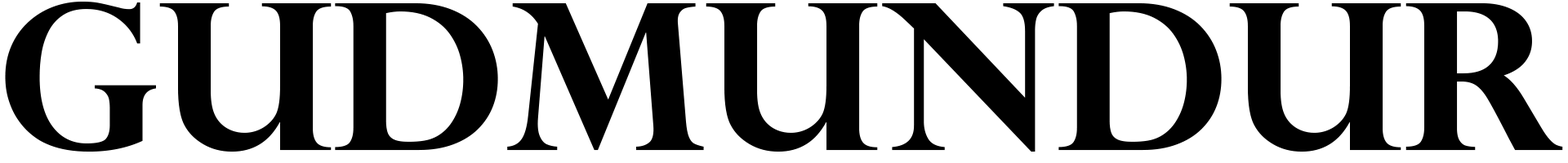
<style>
.page{position:relative;width:1568px;height:163px;background:#ffffff}
.page>*{position:absolute;margin:0}
.t1{font:204.2px "PerpetuaTitlingMT-Bold";color:#000000}
</style>
<div class="page">
<p class="t1" style="left:5px;top:2px;width:1558px;height:150px">Gudmundur</p>
</div>
